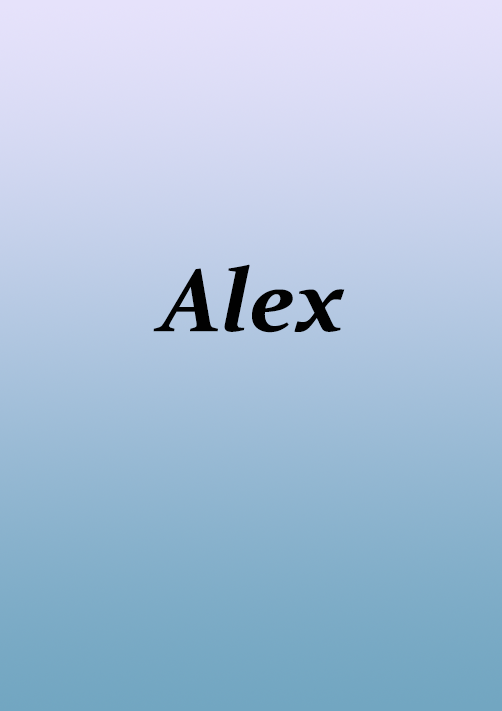
<style>
.page{position:relative;width:502px;height:711px}
.page>*{position:absolute;margin:0}
.t1{font:90px "Constantia-BoldItalic";color:#010101}
</style>
<div class="page">
<p class="t1" style="left:153px;top:264px;width:192px;height:69px">Alex</p>
</div>
